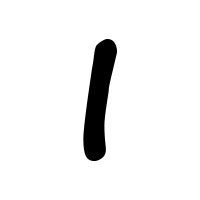
<style>
.page{position:relative;width:200px;height:200px;background:#ffffff}
.page>*{position:absolute;margin:0}
.t1{font:170px "SegoePrint-Bold";color:#000000}
</style>
<div class="page">
<p class="t1" style="left:83px;top:39px;width:35px;height:122px">I</p>
</div>
